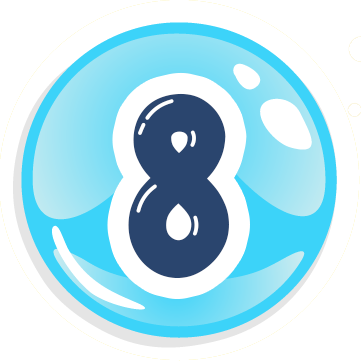
<style>
.page{position:relative;width:361px;height:364px;background:#ffffff}
.page>*{position:absolute;margin:0}
.t1{font:262.5px "BubbleBobble";color:#2a456e}
</style>
<div class="page">
<p class="t1" style="left:128px;top:93px;width:101px;height:185px">8</p>
</div>
